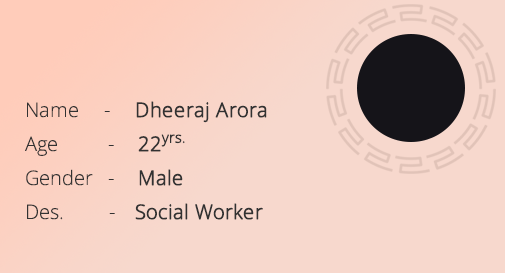
<style>
.page{position:relative;width:505px;height:273px;background:#f7d8cd}
.page>*{position:absolute;margin:0}
.t1{font:20px/34px "OpenSans-Light";color:#323232}
.t2{font:20px/34px "OpenSans-Light";color:#323232;font-weight:bold}
.t3{font:25px/34px "OpenSans-Light";color:#323232;font-weight:bold}
</style>
<div class="page">
<p class="t1" style="left:25px;top:101px;width:242px;height:119px">Name     -     <span class="t2">Dheeraj Arora<br></span>Age          -<span class="t2">    22</span><span class="t3">yrs.<br></span>Gender   -<span class="t2">    Male <br></span>Des.         -    <span class="t2">Social Worker</span></p>
</div>
